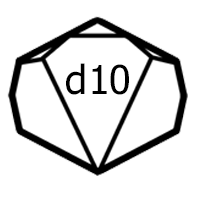
<style>
.page{position:relative;width:200px;height:200px;background:#ffffff}
.page>*{position:absolute;margin:0}
.t1{font:40px "Tahoma";color:#000000}
</style>
<div class="page">
<p class="t1" style="left:66px;top:63px;width:63px;height:32px">d10</p>
</div>
